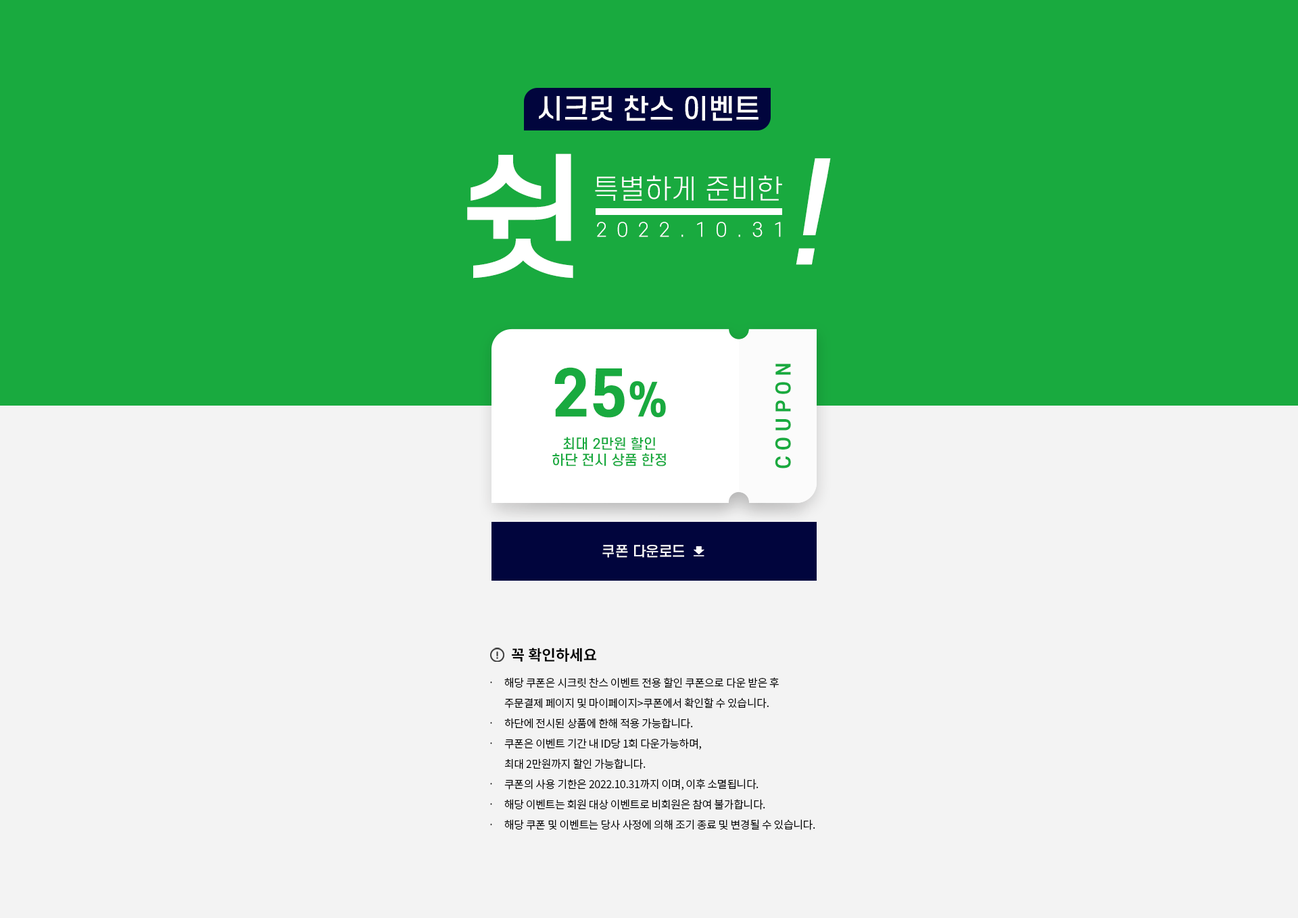
<style>
.page{position:relative;width:1298px;height:918px;background:#f3f3f3}
.page>*{position:absolute;margin:0}
.t1{font:27.1px "S-CoreDream-5Medium";color:#ffffff}
.t2{font:135.3px "S-CoreDream-5Medium";color:#ffffff}
.t3{font:135.3px "S-CoreDream-5Medium";color:#ffffff;font-style:italic}
.t4{font:27.1px "S-CoreDream-3Light";color:#ffffff}
.t5{font:18.9px "S-CoreDream-3Light";letter-spacing:0.5em;color:#ffffff}
.t6{font:18.9px "S-CoreDream-6Bold";letter-spacing:0.28em;color:#19aa3f}
.t7{font:13.5px "S-CoreDream-5Medium";color:#19aa3f}
.t8{font:60.9px "S-CoreDream-7ExtraBold";color:#19aa3f}
.t9{font:44px "S-CoreDream-7ExtraBold";color:#19aa3f}
.t10{font:13.5px "S-CoreDream-5Medium";color:#ffffff}
.t11{font:14.9px "NotoSansKR-Bold";color:#000000}
.t12{font:10.8px/20.3px "NotoSansCJKkr-DemiLight";letter-spacing:-0.02em;color:#000000}
.t13{font:10.8px/20.3px "NotoSansKR-Regular";color:#000000}
</style>
<div class="page">
<p class="t1" style="left:539px;top:95px;width:220px;height:26px">시크릿 찬스 이벤트</p>
<p class="t2" style="left:467px;top:154px;width:106px;height:125px">쉿</p>
<p class="t3" style="left:796px;top:158px;width:35px;height:107px">!</p>
<p class="t4" style="left:595px;top:175px;width:187px;height:26px">특별하게 준비한</p>
<p class="t5" style="left:597px;top:222px;width:184px;height:15px">2022.10.31</p>
<p class="t6" style="left:775px;top:364px;width:16px;height:105px;rotate:-90deg">COUPON</p>
<p class="t7" style="left:553px;top:367px;width:113px;height:100px;text-align:center"><span class="t8">25</span><span class="t9">%<br></span><br>최대 2만원 할인<br>하단 전시 상품 한정</p>
<p class="t10" style="left:603px;top:545px;width:81px;height:13px">쿠폰 다운로드</p>
<p class="t11" style="left:512px;top:648px;width:84px;height:14px">꼭 확인하세요</p>
<p class="t12" style="left:504px;top:678px;width:312px;height:152px">해당 쿠폰은 시크릿 찬스 이벤트 전용 할인 쿠폰으로 다운 받은 후<br>주문결제 페이지 및 마이페이지&gt;쿠폰에서 확인할 수 있습니다.<br>하단에 전시된 상품에 한해 적용 가능합니다.<br>쿠폰은 이벤트 기간 내 ID당 1회 다운가능하며, <br>최대 2만원까지 할인 가능합니다.<br>쿠폰의 사용 기한은 2022.10.31까지 이며, 이후 소멸됩니다.<br>해당 이벤트는 회원 대상 이벤트로 비회원은 참여 불가합니다.<br>해당 쿠폰 및 이벤트는 당사 사정에 의해 조기 종료 및 변경될 수 있습니다.</p>
<p class="t13" style="left:490px;top:682px;width:2px;height:144px">·<br><br>·<br>·<br><br>·<br>·<br>·</p>
</div>
